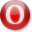
<style>
.page{position:relative;width:32px;height:32px}
.page>*{position:absolute;margin:0}
.t1{font:26px "ACaslonPro-Bold";letter-spacing:0.025em;color:#f5dbdb;scale:0.93 1}
</style>
<div class="page">
<p class="t1" style="left:6px;top:5px;width:18px;height:19px">O</p>
</div>
